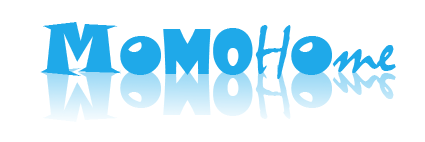
<style>
.page{position:relative;width:425px;height:142px;background:#ffffff}
.page>*{position:absolute;margin:0}
.t1{font:72px "SnapITC-Regular";color:#1fa9e9}
.t2{font:60px "ShowcardGothic-Reg";color:#1fa9e9}
.t3{font:72px "Mistral";color:#1fa9e9}
</style>
<div class="page">
<p class="t1" style="left:40px;top:22px;width:356px;height:57px">Mo<span class="t2">Mo</span><span class="t3">H</span>o<span class="t3">me</span></p>
</div>
